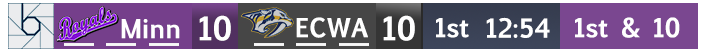
<style>
.page{position:relative;width:702px;height:52px;background:#ffffff}
.page>*{position:absolute;margin:0}
.t1{font:31px "EuphemiaUCAS-Bold";color:#ffffff}
.t2{font:25px "EuphemiaUCAS-Bold";color:#ffffff}
</style>
<div class="page">
<p class="t1" style="left:199px;top:15px;width:32px;height:26px">10</p>
<p class="t2" style="left:296px;top:17px;width:72px;height:21px">ECWA</p>
<p class="t1" style="left:383px;top:15px;width:32px;height:26px">10</p>
<p class="t2" style="left:486px;top:17px;width:64px;height:21px">12:54</p>
<p class="t2" style="left:575px;top:17px;width:105px;height:21px">1st &amp; 10</p>
<p class="t2" style="left:121px;top:19px;width:59px;height:20px">Minn</p>
<p class="t2" style="left:436px;top:18px;width:33px;height:20px">1st</p>
</div>
